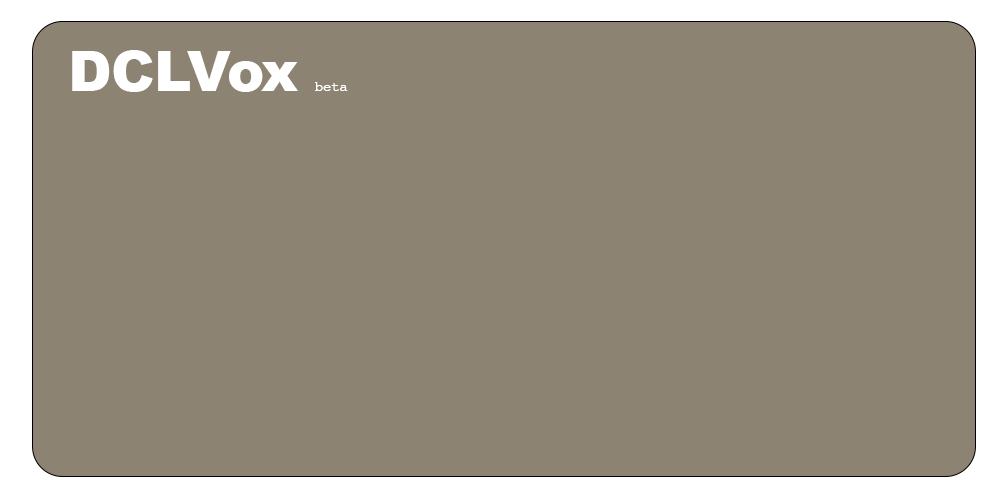
<style>
.page{position:relative;width:1000px;height:500px;background:#8d8372}
.page>*{position:absolute;margin:0}
.t1{font:56.1px "Arial-Black";letter-spacing:-0.02em;color:#ffffff}
.t2{font:14px "Courier";letter-spacing:-0.02em;color:#ffffff}
</style>
<div class="page">
<p class="t1" style="left:72px;top:50px;width:276px;height:42px">DCLVox <span class="t2">beta</span></p>
</div>
